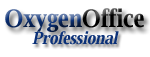
<style>
.page{position:relative;width:150px;height:57px;background:#ffffff}
.page>*{position:absolute;margin:0}
.t1{font:23.9px "LuxiSerif-Bold"}
.t2{font:16.4px "LuxiSerif-BoldOblique";color:#0b3178}
</style>
<div class="page">
<p class="t1" style="left:5px;top:8px;width:139px;height:24px">OxygenOffice</p>
<p class="t2" style="left:32px;top:31px;width:87px;height:14px">Professional</p>
</div>
